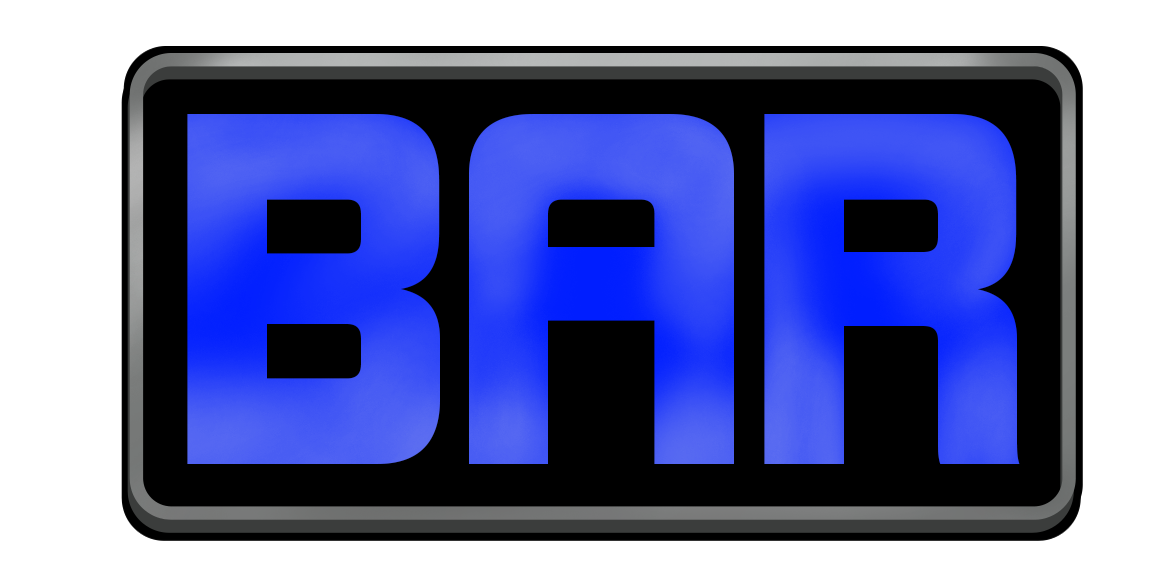
<style>
.page{position:relative;width:1169px;height:571px;background:#ffffff}
.page>*{position:absolute;margin:0}
.t1{font:460px "KimberleyBl-Regular";letter-spacing:-0.02em}
</style>
<div class="page">
<p class="t1" style="left:187px;top:114px;width:833px;height:350px">BAR</p>
</div>
